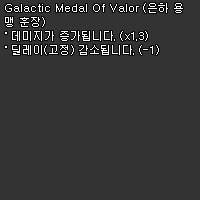
<style>
.page{position:relative;width:200px;height:200px;background:#333333}
.page>*{position:absolute;margin:0}
.t1{font:11px/14px "Dotum";color:#ffffff}
</style>
<div class="page">
<p class="t1" style="left:5px;top:3px;width:178px;height:52px">Galactic Medal Of Valor (은하 용<br>맹 훈장)<br>˚ 데미지가 증가됩니다. (x1.3)<br>˚ 딜레이(고정) 감소됩니다. (-1)</p>
</div>
